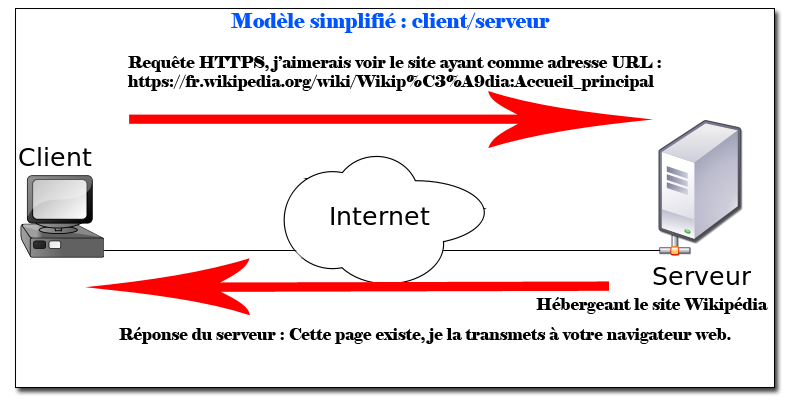
<style>
.page{position:relative;width:800px;height:400px;background:#ffffff}
.page>*{position:absolute;margin:0}
.t1{font:20px "Elephant-Regular";color:#0054ff}
.t2{font:16px "Elephant-Regular";color:#000000}
</style>
<div class="page">
<p class="t1" style="left:231px;top:12px;width:319px;height:21px">Modèle simplifié : client/serveur</p>
<p class="t2" style="left:127px;top:56px;width:534px;height:35px">Requête HTTPS, j’aimerais voir le site ayant comme adresse URL :<br>https://fr.wikipedia.org/wiki/Wikip%C3%A9dia:Accueil_principal</p>
<p class="t2" style="left:536px;top:297px;width:232px;height:17px">Hébergeant le site Wikipédia</p>
<p class="t2" style="left:119px;top:327px;width:612px;height:17px">Réponse du serveur : Cette page existe, je la transmets à votre navigateur web.</p>
</div>
